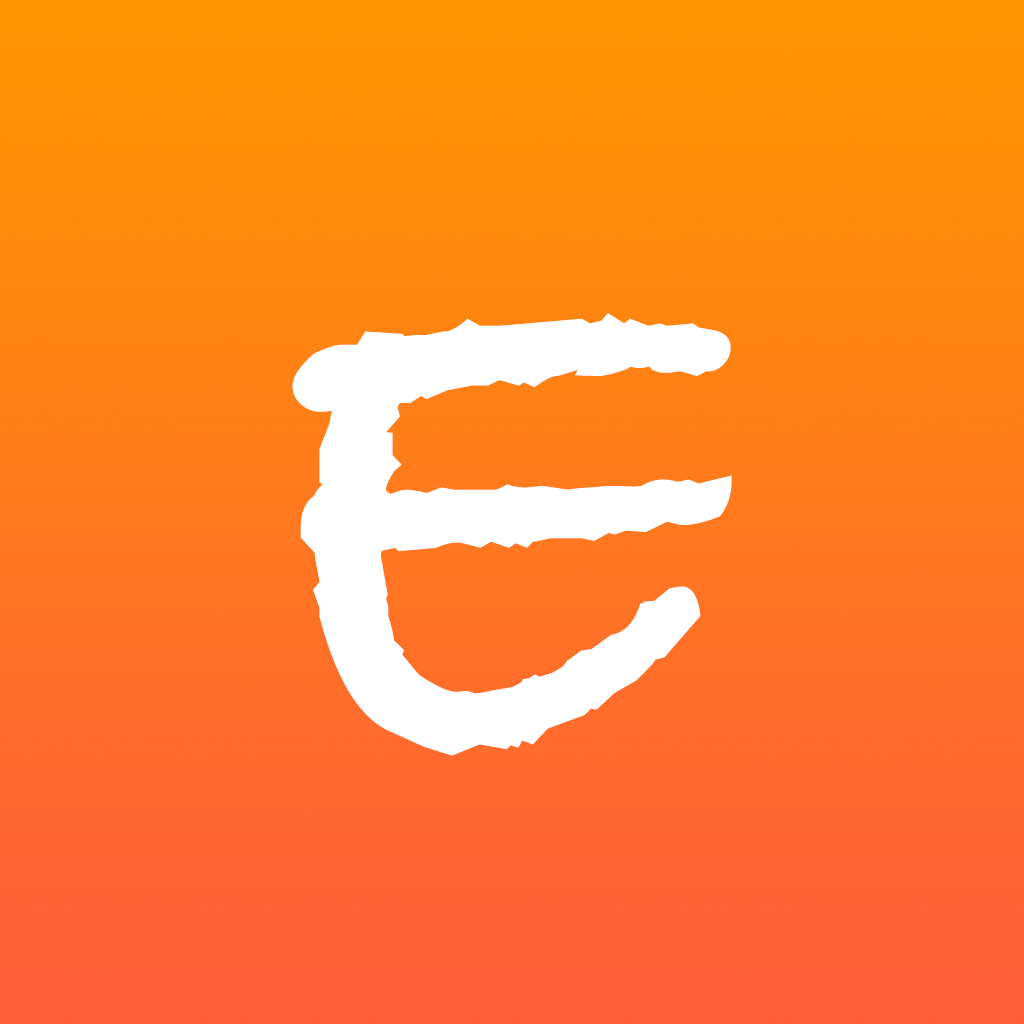
<style>
.page{position:relative;width:1024px;height:1024px}
.page>*{position:absolute;margin:0}
.t1{font:792.2px "BradleyHandITCTT-Bold";letter-spacing:0.02em;color:#ffffff;scale:1.03 1}
</style>
<div class="page">
<p class="t1" style="left:292px;top:313px;width:440px;height:443px">E</p>
</div>
